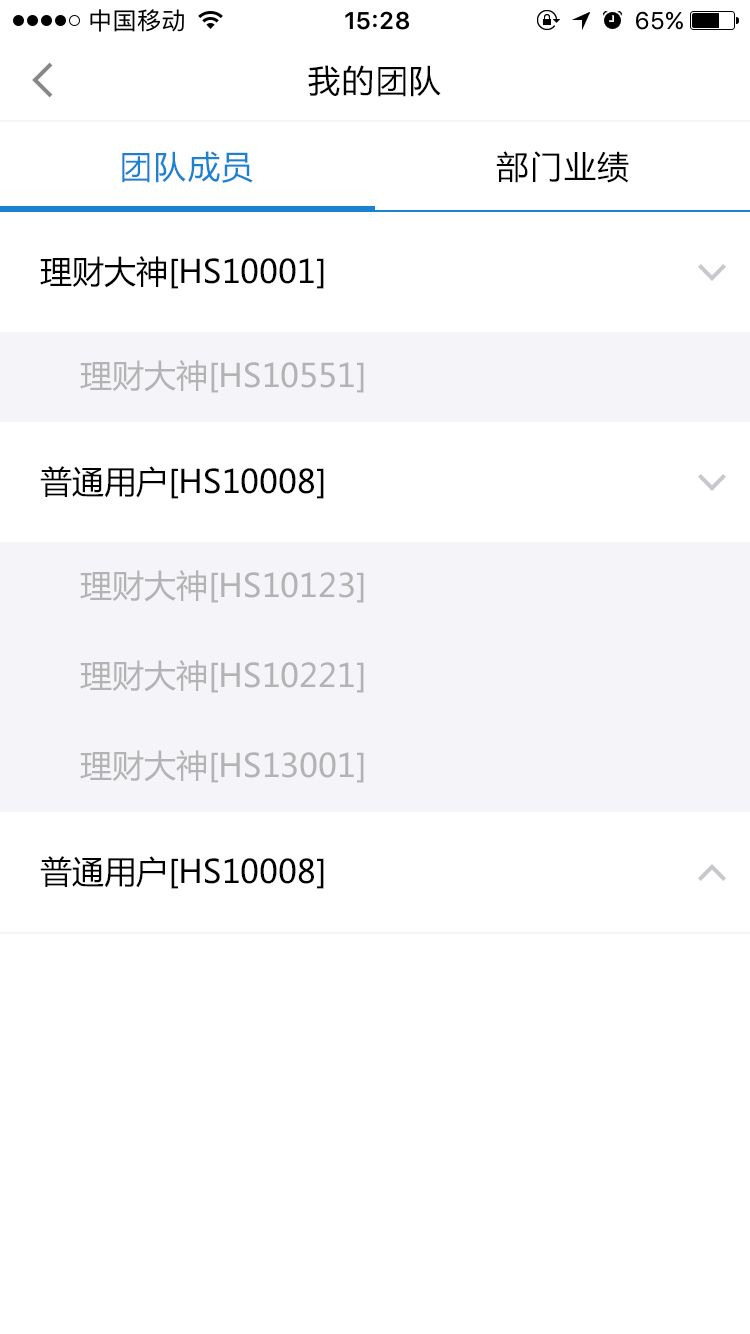
<style>
.page{position:relative;width:750px;height:1334px;background:#ffffff}
.page>*{position:absolute;margin:0}
.t1{font:32px "MicrosoftYaHei";letter-spacing:0.05em;color:#000000}
.t2{font:32px "MicrosoftYaHei";letter-spacing:0.05em;color:#1b82d2}
.t3{font:32px "MicrosoftYaHei";color:#000000}
.t4{font:32px "MicrosoftYaHei";color:#b3b3b3}
</style>
<div class="page">
<p class="t1" style="left:308px;top:65px;width:133px;height:32px">我的团队</p>
<p class="t2" style="left:122px;top:151px;width:131px;height:32px">团队成员</p>
<p class="t1" style="left:496px;top:151px;width:133px;height:32px">部门业绩</p>
<p class="t3" style="left:40px;top:256px;width:284px;height:33px">理财大神[HS10001]</p>
<p class="t4" style="left:80px;top:360px;width:284px;height:33px">理财大神[HS10551]</p>
<p class="t3" style="left:40px;top:466px;width:284px;height:33px">普通用户[HS10008]</p>
<p class="t4" style="left:80px;top:570px;width:284px;height:33px">理财大神[HS10123]</p>
<p class="t4" style="left:80px;top:660px;width:284px;height:33px">理财大神[HS10221]</p>
<p class="t4" style="left:80px;top:750px;width:284px;height:33px">理财大神[HS13001]</p>
<p class="t3" style="left:40px;top:856px;width:284px;height:33px">普通用户[HS10008]</p>
</div>
